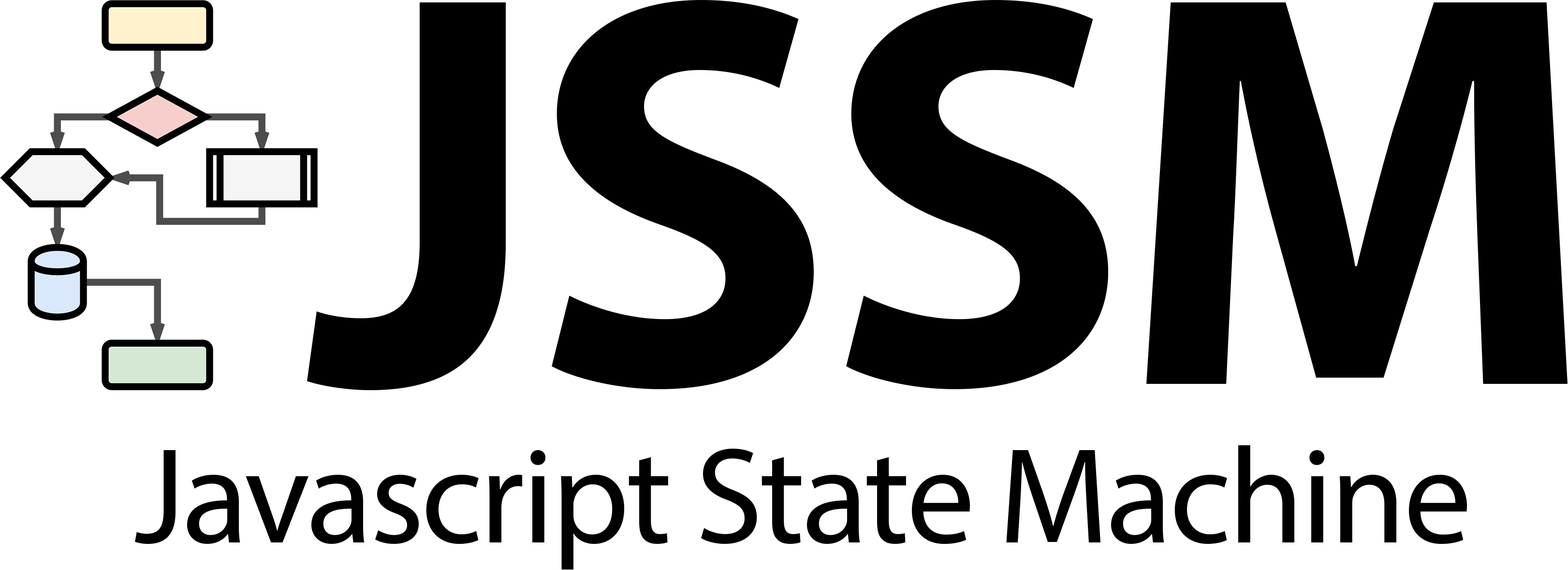
<style>
.page{position:relative;width:1568px;height:570px;background:#ffffff}
.page>*{position:absolute;margin:0}
.t1{font:560.4px "MyriadPro-Bold";letter-spacing:-0.02em;color:#000000}
.t2{font:566px "MyriadPro-Bold";letter-spacing:-0.02em;color:#000000}
.t3{font:136.7px "MyriadPro-Regular";letter-spacing:-0.02em;color:#000000}
</style>
<div class="page">
<p class="t1" style="left:307px;top:0px;width:1261px;height:391px"><span class="t2">J</span>SS<span class="t2">M</span></p>
<p class="t3" style="left:135px;top:445px;width:1332px;height:125px">Javascript State Machine</p>
</div>
